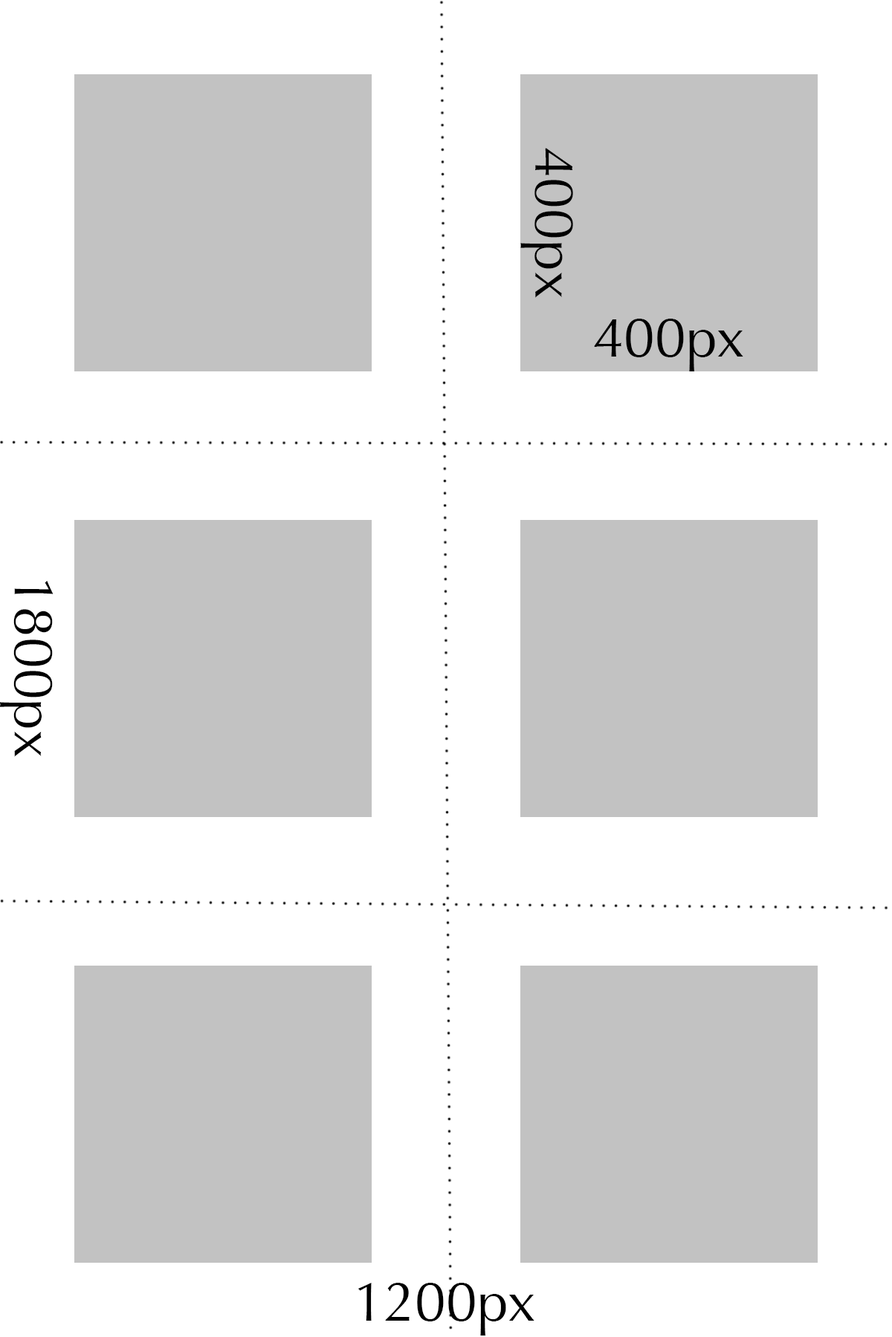
<style>
.page{position:relative;width:892px;height:1337px;background:#ffffff}
.page>*{position:absolute;margin:0}
.t1{font:55.7px "Optima-Regular";color:#000000}
</style>
<div class="page">
<p class="t1" style="left:520px;top:148px;width:53px;height:150px;rotate:90deg">400px</p>
<p class="t1" style="left:594px;top:319px;width:149px;height:53px">400px</p>
<p class="t1" style="left:0px;top:581px;width:53px;height:176px;rotate:90deg">1800px</p>
<p class="t1" style="left:358px;top:1283px;width:176px;height:53px">1200px</p>
</div>
